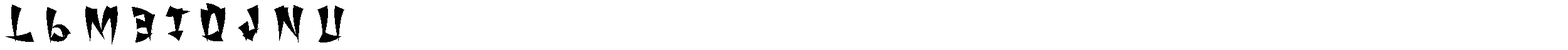
<style>
.page{position:relative;width:1568px;height:50px;background:#ffffff}
.page>*{position:absolute;margin:0}
.t1{font:41.8px "ChangChang";color:#000000}
</style>
<div class="page">
<p class="t1" style="left:6px;top:3px;width:338px;height:42px">L b M 3 I O J N U</p>
</div>
